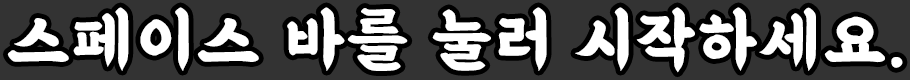
<style>
.page{position:relative;width:910px;height:80px;background:#333333}
.page>*{position:absolute;margin:0}
.t1{font:69.4px "BMEULJIRO";letter-spacing:0.04em;color:#ffffff}
</style>
<div class="page">
<p class="t1" style="left:7px;top:7px;width:896px;height:66px">스페이스 바를 눌러 시작하세요.</p>
</div>
